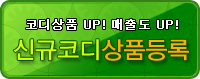
<style>
.page{position:relative;width:200px;height:79px}
.page>*{position:absolute;margin:0}
.t1{font:12px "Dotum";letter-spacing:0.02em;color:#ffffff;font-weight:bold}
.t2{font:24px "YDIYGO330";color:#d2ff00}
.t3{font:24px "YDIYGO330";color:#ffae00}
</style>
<div class="page">
<p class="t1" style="left:26px;top:19px;width:152px;height:11px">코디상품 UP! 매출도 UP!</p>
<p class="t2" style="left:13px;top:39px;width:176px;height:22px">신규코디<span class="t3">상품등록</span></p>
</div>
